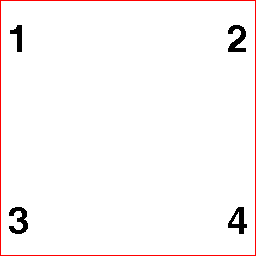
<style>
.page{position:relative;width:256px;height:256px;background:#ffffff}
.page>*{position:absolute;margin:0}
.t1{font:38px "Helvetica-Bold";color:#000000}
</style>
<div class="page">
<p class="t1" style="left:9px;top:25px;width:238px;height:209px">1                  2<br><br><br><br>3                  4</p>
</div>
